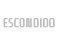
<style>
.page{position:relative;width:58px;height:44px;background:#ffffff}
.page>*{position:absolute;margin:0}
.t1{font:11.3px "AokaneStd-EB";letter-spacing:0.035em;color:#bfbfbf;font-weight:bold;scale:0.69 1}
</style>
<div class="page">
<p class="t1" style="left:3px;top:18px;width:52px;height:10px">ESCONDIDO</p>
</div>
